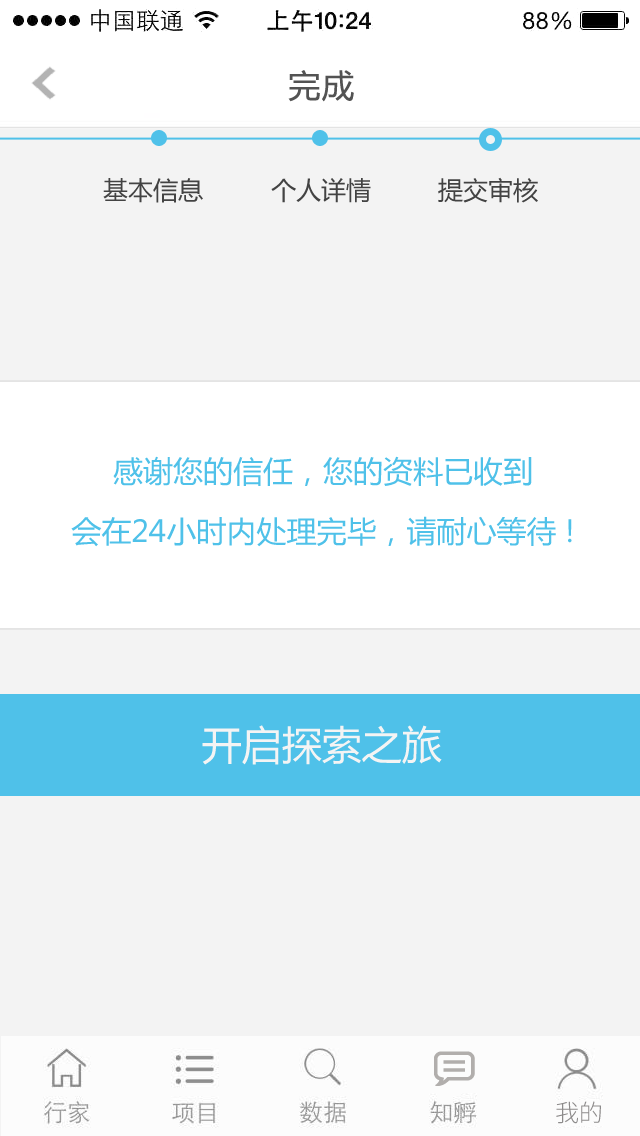
<style>
.page{position:relative;width:640px;height:1136px;background:#f3f3f3}
.page>*{position:absolute;margin:0}
.t1{font:32px "MicrosoftYaHei";letter-spacing:0.05em;color:#535353}
.t2{font:25px "MicrosoftYaHei";color:#434343}
.t3{font:30px/60px "MicrosoftYaHei";color:#4fc1e9}
.t4{font:40px "MicrosoftYaHei";color:#f4f4f4}
.t5{font:24px "SourceHanSansCN-Light";color:#8d8b8b}
</style>
<div class="page">
<p class="t1" style="left:288px;top:70px;width:66px;height:32px">完成</p>
<p class="t2" style="left:103px;top:178px;width:100px;height:25px">基本信息</p>
<p class="t2" style="left:271px;top:178px;width:100px;height:25px">个人详情</p>
<p class="t2" style="left:438px;top:177px;width:100px;height:26px">提交审核</p>
<p class="t3" style="left:71px;top:456px;width:501px;height:91px;text-align:center">感谢您的信任，您的资料已收到<br>会在24小时内处理完毕，请耐心等待 !</p>
<p class="t4" style="left:202px;top:725px;width:240px;height:40px">开启探索之旅</p>
<p class="t5" style="left:556px;top:1101px;width:45px;height:23px">我的</p>
</div>
